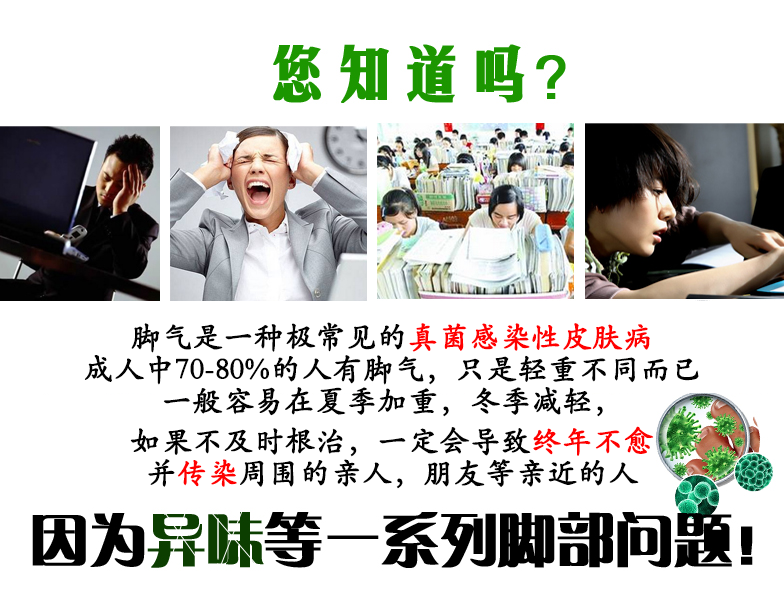
<style>
.page{position:relative;width:784px;height:600px;background:#ffffff}
.page>*{position:absolute;margin:0}
.t1{font:30px/8px "STKaiti";color:#010101;font-weight:bold}
.t2{font:30px/8px "STKaiti";color:#ff0000;font-weight:bold}
.t3{font:30px/8px "STKaiti";color:#fe0000;font-weight:bold}
</style>
<div class="page">
<p class="t1" style="left:84px;top:322px;width:615px;height:167px;text-align:center">脚气是一种极常见的<span class="t2">真菌感染性皮肤病<br></span><br><br><br>成人中70-80%的人有脚气，只是轻重不同而已<br><br><br><br>一般容易在夏季加重，冬季减轻，<br><br><br><br><br>如果不及时根治，一定会导致<span class="t3">终年不愈<br></span><br><br><br>并<span class="t2">传染</span>周围的亲人，朋友等亲近的人</p>
</div>
